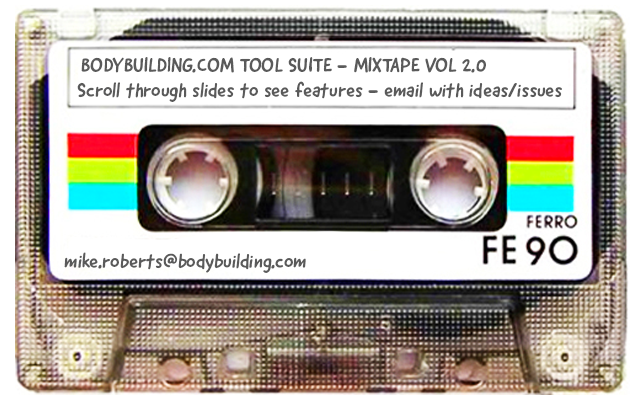
<style>
.page{position:relative;width:640px;height:400px;background:#ffffff}
.page>*{position:absolute;margin:0}
.t1{font:20px "GoodDogNew";color:#5a5a5a}
</style>
<div class="page">
<p class="t1" style="left:81px;top:57px;width:405px;height:16px">BODYBUILDING.COM TOOL SUITE - MIXTAPE VOL 2.0</p>
<p class="t1" style="left:77px;top:81px;width:485px;height:21px">Scroll through slides to see features - email with ideas/issues</p>
<p class="t1" style="left:64px;top:252px;width:242px;height:21px">mike.roberts@bodybuilding.com</p>
</div>
